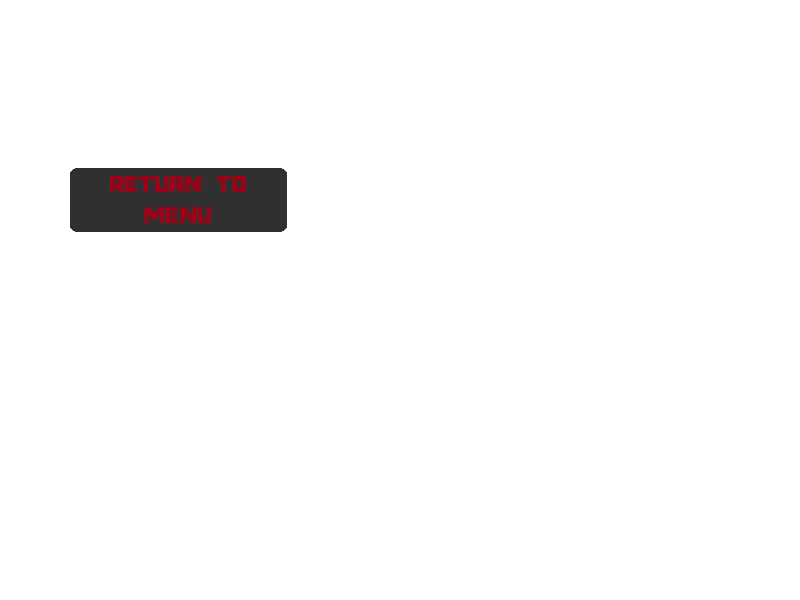
<style>
.page{position:relative;width:800px;height:600px;background:#ffffff}
.page>*{position:absolute;margin:0}
.t1{font:26px "ARDESTINE";color:#9e0017}
</style>
<div class="page">
<p class="t1" style="left:110px;top:176px;width:136px;height:47px;text-align:center">RETURN TO<br>MENU</p>
</div>
